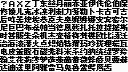
<style>
.page{position:relative;width:128px;height:72px;background:#fbfbfb}
.page>*{position:absolute;margin:0}
.t1{font:8px/8px "Zfull-GB";color:#000000}
.t2{font:8px/8px "Zfull-GB"}
.t3{font:8px "GuanZhi";color:#000000}
</style>
<div class="page">
<p class="t1" style="left:0px;top:0px;width:127px;height:71px">丁东丝丹丽乔亚伊传伦伯保<br>修像儿克冰凛利刺力务勒卜卡古可吉<br>后吽器块埃基夏夫奥妮姆娜安宾密尔<br>尼巨巴布希帕当德恩戴扎托拉提摇斯<br>时普服朱朵机杰查格梅梵模欧比汤沃<br>治海滚潘火点炽焰特猬玛珍珑理瑞瓦<br>电皮盖瞪石磁秃科米系约纳统缇罗羚<br>翰艾花莉莎萝萨蒙蔷蕾薇蜂詹贝贾赫<br>达迪送里阿雅雷马鬼鲁鲎鳄鹰齿</p>
<p class="t2" style="left:1px;top:0px;width:127px;height:71px">丁东丝丹丽乔亚伊传伦伯保<br>修像儿克冰凛利刺力务勒卜卡古可吉<br>后吽器块埃基夏夫奥妮姆娜安宾密尔<br>尼巨巴布希帕当德恩戴扎托拉提摇斯<br>时普服朱朵机杰查格梅梵模欧比汤沃<br>治海滚潘火点炽焰特猬玛珍珑理瑞瓦<br>电皮盖瞪石磁秃科米系约纳统缇罗羚<br>翰艾花莉莎萝萨蒙蔷蕾薇蜂詹贝贾赫<br>达迪送里阿雅雷马鬼鲁鲎鳄鹰齿</p>
<p class="t3" style="left:56px;top:32px;width:15px;height:7px">查格</p>
</div>
